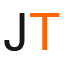
<style>
.page{position:relative;width:64px;height:64px;background:#ffffff}
.page>*{position:absolute;margin:0}
.t1{font:57px "Raavi";color:#181818}
.t2{font:57px "Raavi";color:#ff6600}
</style>
<div class="page">
<p class="t1" style="left:4px;top:13px;width:56px;height:38px">J<span class="t2">T</span></p>
</div>
